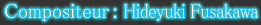
<style>
.page{position:relative;width:261px;height:25px;background:#333333}
.page>*{position:absolute;margin:0}
.t1{font:20px "MS-PMincho";letter-spacing:-0.025em;color:#ffffff;scale:0.9 1}
.t2{font:20px "MS-PMincho";color:#ffffff}
.t3{font:20px "MS-PMincho";letter-spacing:-0.05em;color:#ffffff}
</style>
<div class="page">
<p class="t1" style="left:5px;top:3px;width:253px;height:18px"><span class="t2">Compositeur </span><span class="t3">: </span>Hideyuki Fusakawa</p>
</div>
